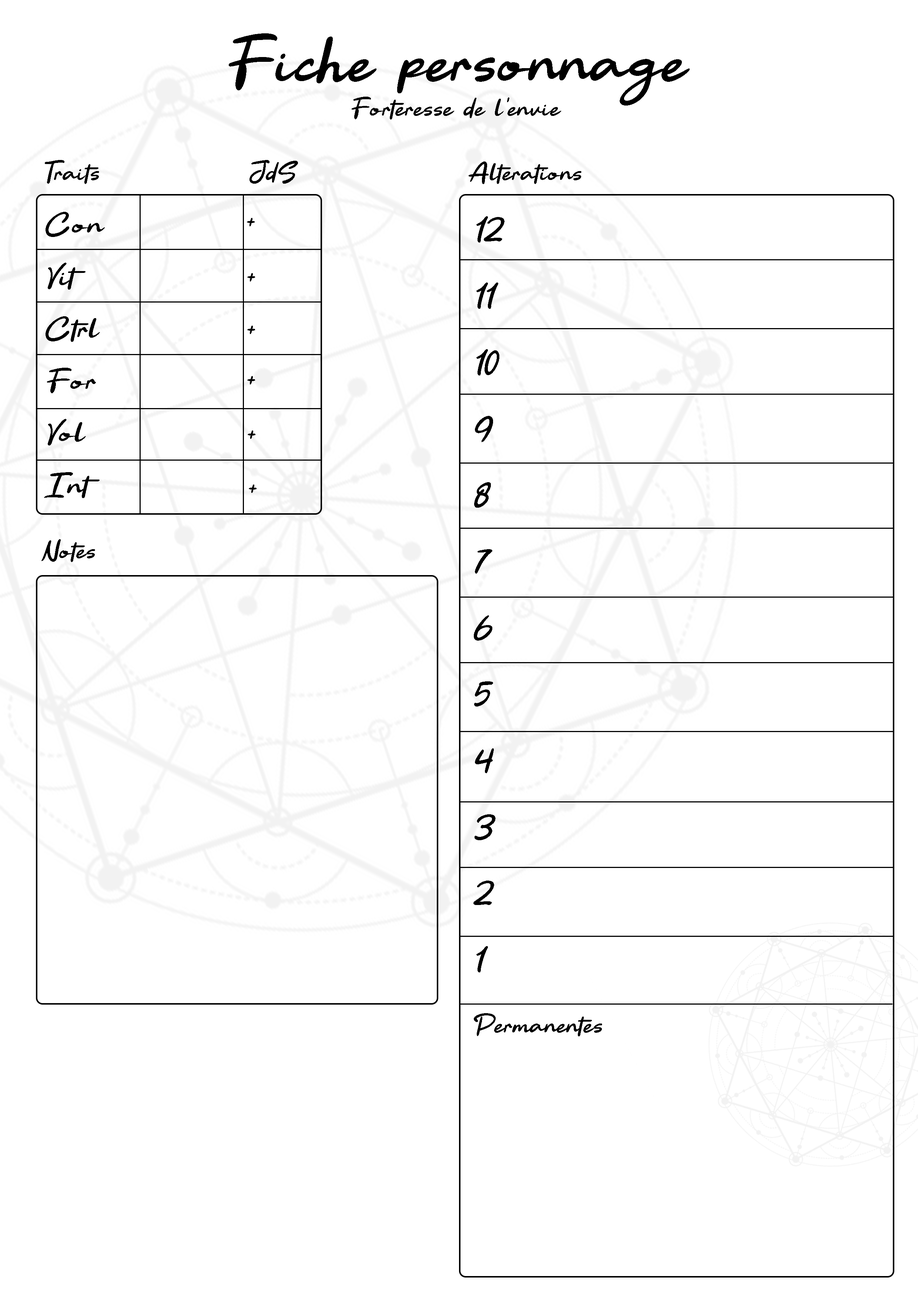
<style>
.page{position:relative;width:918px;height:1299px;background:#ffffff}
.page>*{position:absolute;margin:0}
.t1{font:74px "Malvides";color:#000000}
.t2{font:29.3px "Malvides";color:#000000}
.t3{font:33.3px "Malvides";color:#000000;scale:1.11 1}
.t4{font:37px/66.3px "Malvides";color:#000000}
</style>
<div class="page">
<p class="t1" style="left:229px;top:33px;width:461px;height:73px">Fiche personnage</p>
<p class="t2" style="left:352px;top:97px;width:209px;height:23px">Forteresse de l’envie</p>
<p class="t2" style="left:45px;top:160px;width:54px;height:24px">Traits</p>
<p class="t2" style="left:250px;top:160px;width:48px;height:24px">JdS</p>
<p class="t2" style="left:469px;top:161px;width:113px;height:23px">Alterations</p>
<p class="t3" style="left:44px;top:212px;width:61px;height:286px">Con<br>Vit<br>Ctrl<br>For<br>Vol<br>Int</p>
<p class="t2" style="left:247px;top:218px;width:8px;height:8px">+</p>
<p class="t4" style="left:474px;top:216px;width:31px;height:756px">12<br>11<br>10<br>9<br>8<br>7<br>6<br>5<br>4<br>3<br>2<br>1</p>
<p class="t2" style="left:247px;top:273px;width:8px;height:8px">+</p>
<p class="t2" style="left:247px;top:325px;width:8px;height:9px">+</p>
<p class="t2" style="left:247px;top:376px;width:8px;height:8px">+</p>
<p class="t2" style="left:248px;top:430px;width:7px;height:9px">+</p>
<p class="t2" style="left:249px;top:484px;width:8px;height:9px">+</p>
<p class="t2" style="left:41px;top:539px;width:54px;height:23px">Notes</p>
<p class="t2" style="left:474px;top:1013px;width:128px;height:23px">Permanentes</p>
</div>
